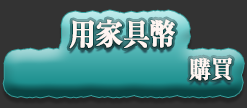
<style>
.page{position:relative;width:247px;height:108px;background:#333333}
.page>*{position:absolute;margin:0}
.t1{font:30px/38px "RyuminPr6N-ExBold";color:#fff5f1;font-weight:bold;scale:0.9 1}
.t2{font:24px "RyuminPr6N-ExBold";color:#fff5f1;font-weight:bold;scale:0.9 1}
</style>
<div class="page">
<p class="t1" style="left:69px;top:19px;width:163px;height:62px;text-align:center">用家具幣<br>　　　　　　　　<span class="t2">購買</span></p>
</div>
